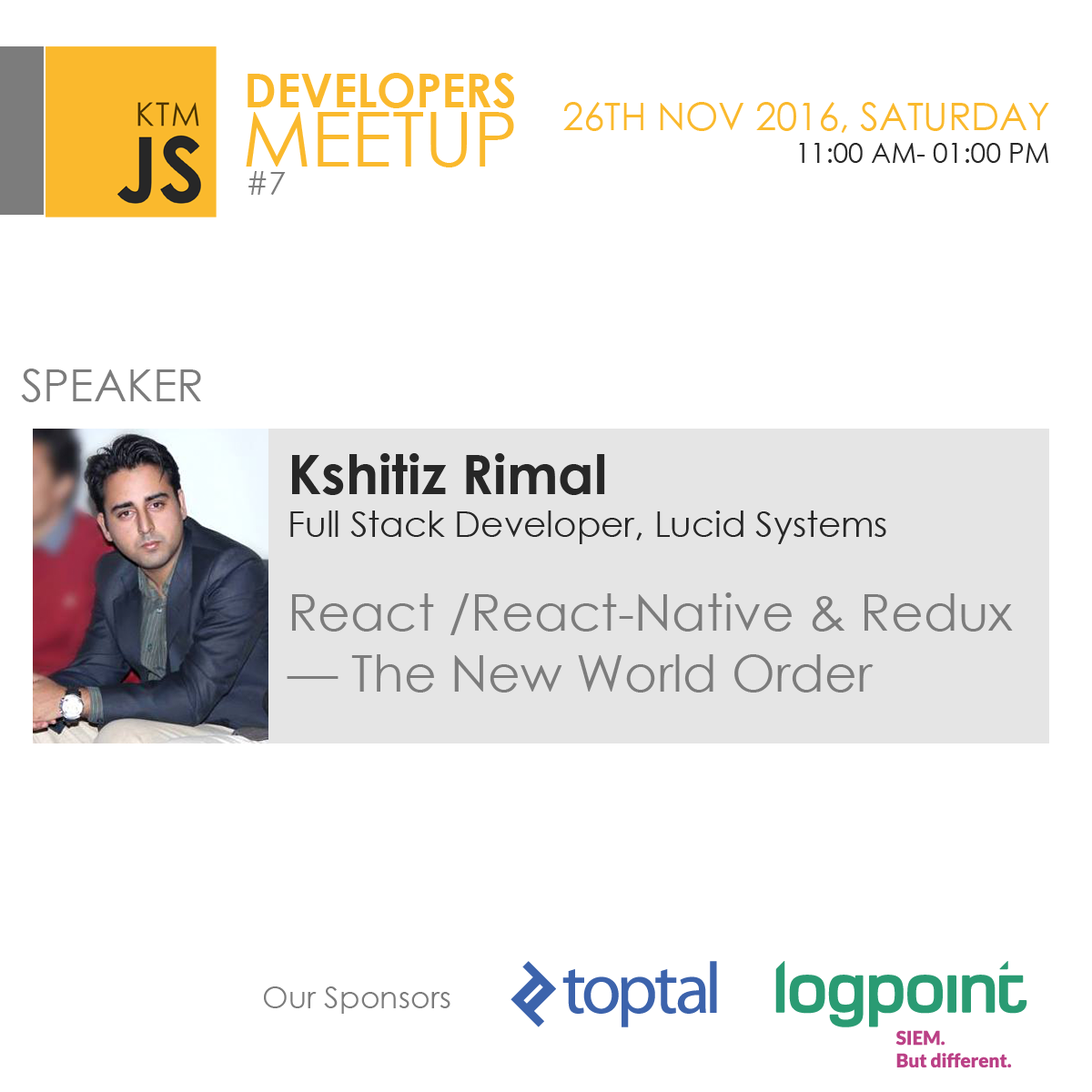
<style>
.page{position:relative;width:1092px;height:1092px;background:#ffffff}
.page>*{position:absolute;margin:0}
.t1{font:46px "CenturyGothic-Bold";color:#fab92d}
.t2{font:37.9px "CenturyGothic";color:#fab92d;text-transform:uppercase}
.t3{font:27.3px "CenturyGothic";color:#272727;text-transform:uppercase}
.t4{font:75.3px "CenturyGothic";color:#fab92d}
.t5{font:32.2px "CenturyGothic";color:#7c7c7c}
.t6{font:44.6px "CenturyGothic";color:#7c7c7c}
.t7{font:35.4px "CenturyGothic";color:#272727}
.t8{font:54.8px "CenturyGothic-Bold";color:#272727}
.t9{font:50.4px "CenturyGothic";color:#7c7c7c}
.t10{font:30.3px "CenturyGothic";color:#7c7c7c}
</style>
<div class="page">
<p class="t1" style="left:248px;top:73px;width:266px;height:35px">DEVELOPERS</p>
<p class="t2" style="left:563px;top:102px;width:486px;height:61px;text-align:right">26th NOV 2016, Saturday<br><span class="t3">11:00 AM- 01:00 PM</span></p>
<p class="t4" style="left:246px;top:112px;width:268px;height:55px">MEETUP</p>
<p class="t5" style="left:248px;top:171px;width:38px;height:24px">#7</p>
<p class="t6" style="left:21px;top:369px;width:180px;height:33px">SPEAKER</p>
<p class="t7" style="left:290px;top:453px;width:596px;height:91px"><span class="t8">Kshitiz Rimal<br></span>Full Stack Developer, Lucid Systems</p>
<p class="t9" style="left:287px;top:592px;width:726px;height:101px">React /React-Native &amp; Redux <br>— The New World Order</p>
<p class="t10" style="left:264px;top:986px;width:186px;height:28px">Our Sponsors</p>
</div>
